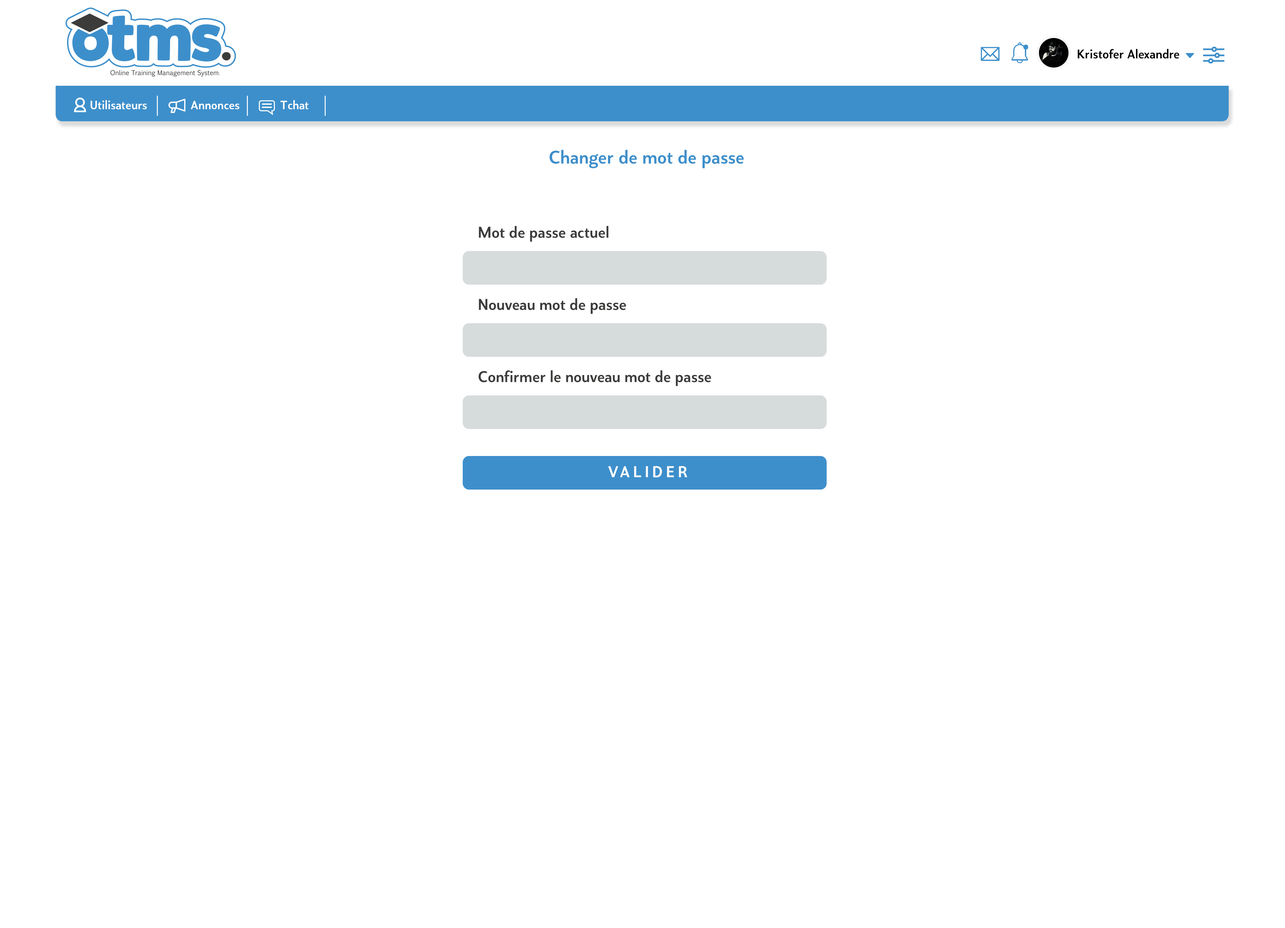
<style>
.page{position:relative;width:1285px;height:928px;background:#ffffff}
.page>*{position:absolute;margin:0}
.t1{font:12.6px "ProdaSans-Medium";color:#000000}
.t2{font:12.1px "ProdaSans-Medium";color:#ffffff}
.t3{font:18.4px "ProdaSans-Medium";color:#3d8fcb}
.t4{font:15.7px "ProdaSans-Medium";color:#3c3c3b}
.t5{font:15.7px "ProdaSans-Medium";letter-spacing:0.2em;color:#ffffff}
</style>
<div class="page">
<p class="t1" style="left:1078px;top:49px;width:101px;height:10px">Kristofer Alexandre</p>
<p class="t2" style="left:90px;top:100px;width:219px;height:10px">Utilisateurs              Annonces             Tchat</p>
<p class="t3" style="left:549px;top:150px;width:195px;height:18px">Changer de mot de passe</p>
<p class="t4" style="left:479px;top:226px;width:130px;height:16px">Mot de passe actuel</p>
<p class="t4" style="left:479px;top:298px;width:147px;height:16px">Nouveau mot de passe</p>
<p class="t4" style="left:478px;top:370px;width:233px;height:16px">Confirmer le nouveau mot de passe</p>
<p class="t5" style="left:608px;top:466px;width:79px;height:11px">VALIDER</p>
</div>
